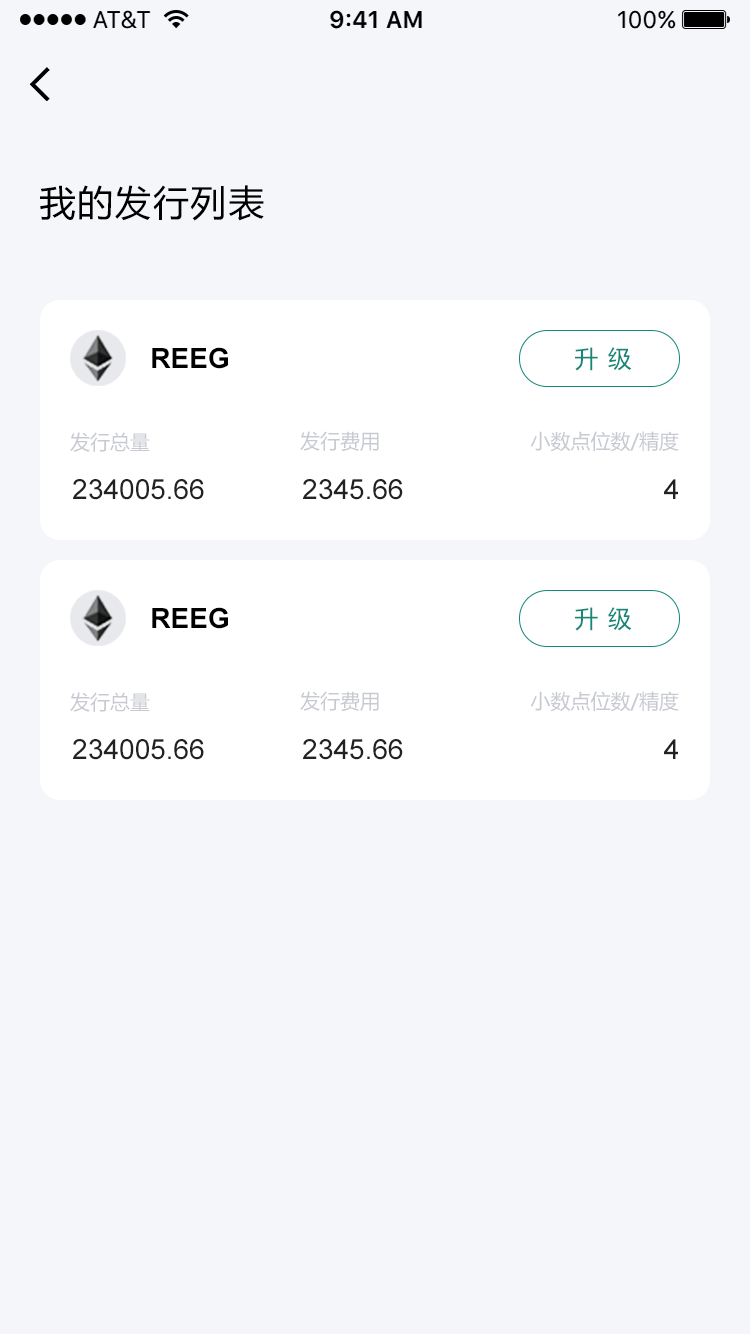
<style>
.page{position:relative;width:750px;height:1334px;background:#f5f6fa}
.page>*{position:absolute;margin:0}
.t1{font:36px "MicrosoftYaHei";letter-spacing:0.05em;color:#000000}
.t2{font:28px "Arial-BoldMT";color:#000000}
.t3{font:24px "MicrosoftYaHei";letter-spacing:0.05em;color:#158878}
.t4{font:20px "MicrosoftYaHei";color:#c8cad2}
.t5{font:28px "ArialMT";color:#222222}
</style>
<div class="page">
<p class="t1" style="left:40px;top:185px;width:224px;height:36px">我的发行列表</p>
<p class="t2" style="left:152px;top:347px;width:76px;height:22px">REEG</p>
<p class="t3" style="left:575px;top:347px;width:57px;height:24px">升 级</p>
<p class="t4" style="left:70px;top:432px;width:80px;height:20px">发行总量</p>
<p class="t4" style="left:300px;top:431px;width:79px;height:20px">发行费用</p>
<p class="t4" style="left:530px;top:431px;width:149px;height:21px">小数点位数/精度</p>
<p class="t5" style="left:73px;top:479px;width:131px;height:21px">234005.66</p>
<p class="t5" style="left:303px;top:479px;width:100px;height:21px">2345.66</p>
<p class="t5" style="left:664px;top:479px;width:14px;height:20px">4</p>
<p class="t2" style="left:152px;top:607px;width:76px;height:22px">REEG</p>
<p class="t3" style="left:575px;top:607px;width:57px;height:24px">升 级</p>
<p class="t4" style="left:70px;top:692px;width:80px;height:20px">发行总量</p>
<p class="t4" style="left:300px;top:691px;width:79px;height:20px">发行费用</p>
<p class="t4" style="left:530px;top:691px;width:149px;height:21px">小数点位数/精度</p>
<p class="t5" style="left:73px;top:739px;width:131px;height:21px">234005.66</p>
<p class="t5" style="left:303px;top:739px;width:100px;height:21px">2345.66</p>
<p class="t5" style="left:664px;top:739px;width:14px;height:20px">4</p>
</div>
